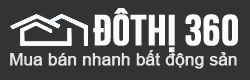
<style>
.page{position:relative;width:250px;height:80px;background:#333333}
.page>*{position:absolute;margin:0}
.t1{font:43.3px "UTM-Bebas";color:#fcfcfc;font-weight:bold}
.t2{font:16.7px "ArialMT";color:#e3e5e3;font-weight:bold}
</style>
<div class="page">
<p class="t1" style="left:93px;top:8px;width:145px;height:45px">ĐÔTHỊ 360</p>
<p class="t2" style="left:10px;top:50px;width:227px;height:19px">Mua bán nhanh bất động sản</p>
</div>
